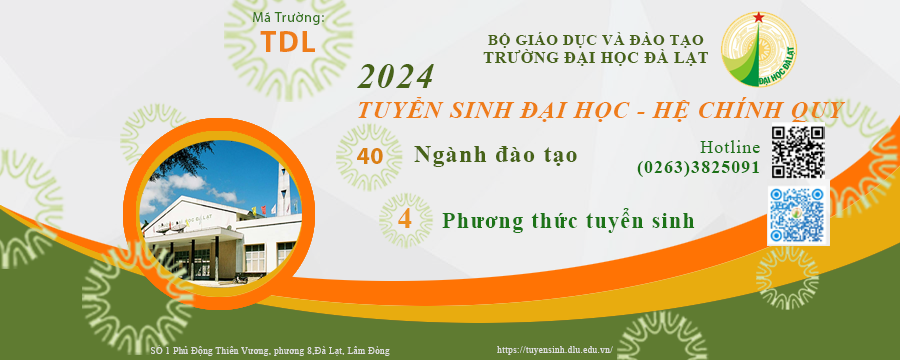
<style>
.page{position:relative;width:900px;height:360px}
.page>*{position:absolute;margin:0}
.t1{font:14px/30px "MyriadPro-Regular";letter-spacing:0.05em;color:#35741e}
.t2{font:30px/30px "MyriadPro-Bold";letter-spacing:0.05em;color:#ee7d1a}
.t3{font:15px/18px "TimesNewRomanPS-BoldMT";letter-spacing:0.05em;color:#476318}
.t4{font:16px/18px "TimesNewRomanPS-BoldMT";letter-spacing:0.05em;color:#476318}
.t5{font:24px/30px "TimesNewRomanPS-BoldItalicMT";letter-spacing:0.05em;color:#ee7d1a}
.t6{font:36px/30px "TimesNewRomanPS-BoldItalicMT";letter-spacing:0.05em;color:#476318}
.t7{font:24px "MyriadPro-Bold";color:#da8013}
.t8{font:24px "TimesNewRomanPS-BoldMT";letter-spacing:0.05em;color:#476318}
.t9{font:18.2px/20.5px "TimesNewRomanPS-BoldMT";letter-spacing:0.05em;color:#1b7116}
.t10{font:18.2px/20.5px "TimesNewRomanPSMT";letter-spacing:0.05em;color:#1b7116}
.t11{font:30px "TimesNewRomanPS-BoldMT";letter-spacing:0.05em;color:#eb9021}
.t12{font:22.4px "TimesNewRomanPS-BoldMT";letter-spacing:0.05em;color:#1d7418}
.t13{font:9px "TimesNewRomanPSMT";letter-spacing:0.05em;color:#e0e0e0}
</style>
<div class="page">
<p class="t1" style="left:253px;top:12px;width:71px;height:40px;text-align:center">Mã Trường:<br><span class="t2">TDL</span></p>
<p class="t3" style="left:483px;top:32px;width:225px;height:34px;text-align:center">BỘ GIÁO DỤC VÀ ĐÀO TẠO<br><span class="t4">TRƯỜNG ĐẠI HỌC ĐÀ LẠT</span></p>
<p class="t5" style="left:357px;top:64px;width:489px;height:59px"><span class="t6">2024<br></span>TUYỂN SINH ĐẠI HỌC - HỆ CHÍNH QUY</p>
<p class="t7" style="left:357px;top:148px;width:26px;height:16px">40</p>
<p class="t8" style="left:414px;top:146px;width:163px;height:21px">Ngành đào tạo</p>
<p class="t9" style="left:637px;top:140px;width:123px;height:37px;text-align:right"><span class="t10">Hotline<br></span>(0263)3825091</p>
<p class="t11" style="left:398px;top:208px;width:14px;height:20px">4</p>
<p class="t12" style="left:442px;top:208px;width:253px;height:25px">Phương thức tuyển sinh</p>
<p class="t13" style="left:150px;top:345px;width:240px;height:11px">SÓ 1 Phủ Động Thiên Vương, phương 8,Đà Lạt, Lâm Đòng</p>
<p class="t13" style="left:497px;top:346px;width:116px;height:9px">https://tuyensinh.dlu.edu.vn/</p>
</div>
